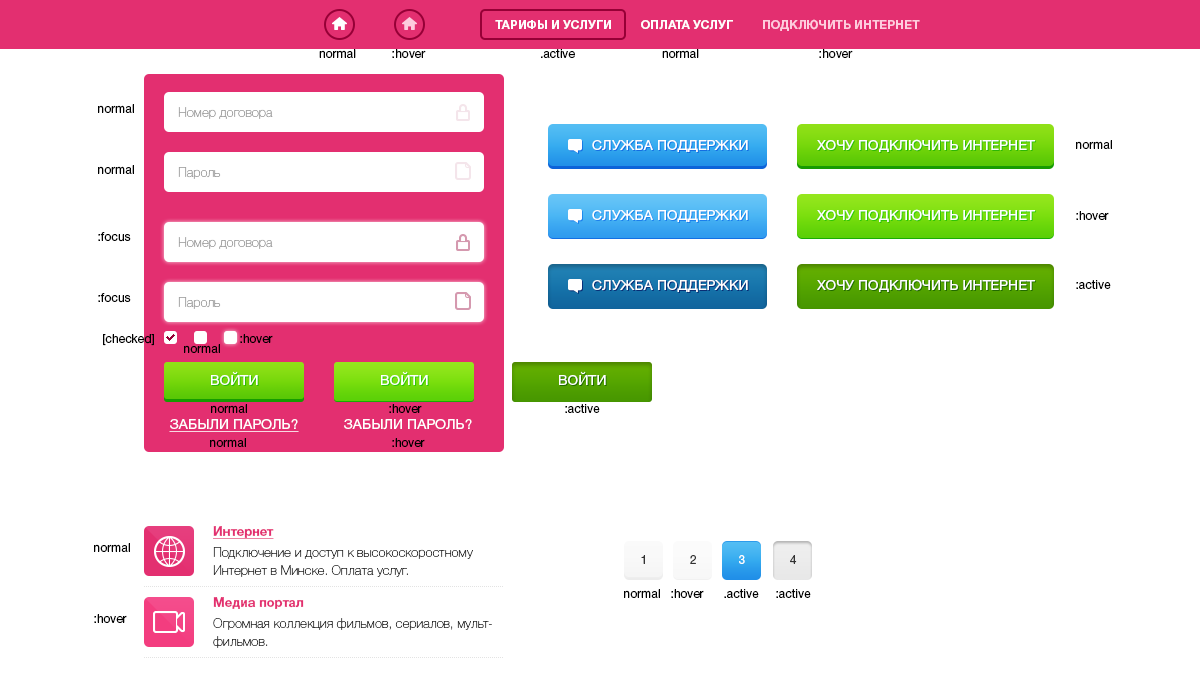
<style>
.page{position:relative;width:1200px;height:688px;background:#ffffff}
.page>*{position:absolute;margin:0}
.t1{font:12px "HelveticaNeueCyr-Bold";color:#ffffff;text-transform:uppercase}
.t2{font:12px "HelveticaNeueCyr-Bold";color:#fdcbdd;text-transform:uppercase}
.t3{font:12px "HelveticaNeueCyr-Roman";color:#000000}
.t4{font:13px "HelveticaNeueCyr-Thin";color:#a3a3a3}
.t5{font:14px "HelveticaNeueCyr-Roman";color:#ffffff;text-transform:uppercase}
.t6{font:14px "HelveticaNeueCyr-Roman";color:#ffffff;text-transform:uppercase;text-decoration:underline}
.t7{font:13px/18px "HelveticaNeueCyr-Thin";color:#333333}
.t8{font:13px "HelveticaNeueCyr-Bold";color:#e32f70;text-decoration:underline}
.t9{font:12px "HelveticaNeueCyr-Roman";color:#333333;text-transform:uppercase}
.t10{font:12px "HelveticaNeueCyr-Roman";color:#fffefe;text-transform:uppercase}
.t11{font:13px "HelveticaNeueCyr-Bold";color:#e32f70}
</style>
<div class="page">
<p class="t1" style="left:495px;top:20px;width:116px;height:10px">Тарифы и услуги</p>
<p class="t1" style="left:641px;top:20px;width:92px;height:10px">Оплата услуг</p>
<p class="t2" style="left:763px;top:19px;width:157px;height:12px">Подключить интернет</p>
<p class="t3" style="left:319px;top:49px;width:37px;height:9px">normal</p>
<p class="t3" style="left:392px;top:49px;width:34px;height:9px">:hover</p>
<p class="t3" style="left:541px;top:49px;width:34px;height:9px">.active</p>
<p class="t3" style="left:662px;top:49px;width:37px;height:9px">normal</p>
<p class="t3" style="left:819px;top:49px;width:34px;height:9px">:hover</p>
<p class="t3" style="left:98px;top:104px;width:36px;height:9px">normal</p>
<p class="t4" style="left:178px;top:107px;width:95px;height:12px">Номер договора</p>
<p class="t5" style="left:592px;top:140px;width:156px;height:12px">Служба поддержки</p>
<p class="t5" style="left:817px;top:139px;width:218px;height:13px">Хочу подключить интернет</p>
<p class="t3" style="left:1076px;top:140px;width:36px;height:9px">normal</p>
<p class="t3" style="left:98px;top:165px;width:36px;height:9px">normal</p>
<p class="t4" style="left:178px;top:167px;width:43px;height:12px">Пароль</p>
<p class="t5" style="left:817px;top:209px;width:218px;height:13px">Хочу подключить интернет</p>
<p class="t5" style="left:592px;top:210px;width:156px;height:12px">Служба поддержки</p>
<p class="t3" style="left:1076px;top:211px;width:33px;height:9px">:hover</p>
<p class="t3" style="left:98px;top:232px;width:33px;height:10px">:focus</p>
<p class="t4" style="left:178px;top:237px;width:95px;height:12px">Номер договора</p>
<p class="t5" style="left:592px;top:280px;width:156px;height:12px">Служба поддержки</p>
<p class="t5" style="left:817px;top:279px;width:218px;height:13px">Хочу подключить интернет</p>
<p class="t3" style="left:1076px;top:280px;width:35px;height:9px">:active</p>
<p class="t3" style="left:98px;top:293px;width:33px;height:10px">:focus</p>
<p class="t4" style="left:178px;top:297px;width:43px;height:12px">Пароль</p>
<p class="t3" style="left:103px;top:334px;width:51px;height:12px">[checked]</p>
<p class="t3" style="left:240px;top:334px;width:33px;height:9px">:hover</p>
<p class="t3" style="left:184px;top:344px;width:36px;height:9px">normal</p>
<p class="t5" style="left:211px;top:371px;width:47px;height:14px">Войти</p>
<p class="t5" style="left:381px;top:371px;width:47px;height:14px">Войти</p>
<p class="t5" style="left:559px;top:371px;width:47px;height:14px">Войти</p>
<p class="t3" style="left:211px;top:404px;width:36px;height:9px">normal</p>
<p class="t3" style="left:389px;top:404px;width:33px;height:9px">:hover</p>
<p class="t3" style="left:565px;top:404px;width:35px;height:9px">:active</p>
<p class="t6" style="left:169px;top:419px;width:130px;height:13px">Забыли пароль?</p>
<p class="t5" style="left:344px;top:419px;width:128px;height:11px">Забыли пароль?</p>
<p class="t3" style="left:210px;top:438px;width:36px;height:9px">normal</p>
<p class="t3" style="left:392px;top:438px;width:33px;height:9px">:hover</p>
<p class="t7" style="left:213px;top:526px;width:260px;height:51px"><span class="t8">Интернет<br></span>Подключение и доступ к высокоскоростному<br>Интернет в Минске. Оплата услуг.</p>
<p class="t3" style="left:94px;top:543px;width:36px;height:9px">normal</p>
<p class="t9" style="left:641px;top:555px;width:4px;height:9px">1</p>
<p class="t9" style="left:690px;top:555px;width:6px;height:9px">2</p>
<p class="t10" style="left:739px;top:555px;width:6px;height:9px">3</p>
<p class="t9" style="left:790px;top:555px;width:7px;height:9px">4</p>
<p class="t3" style="left:624px;top:589px;width:36px;height:9px">normal</p>
<p class="t3" style="left:671px;top:589px;width:33px;height:9px">:hover</p>
<p class="t3" style="left:724px;top:589px;width:35px;height:9px">.active</p>
<p class="t3" style="left:776px;top:589px;width:35px;height:9px">:active</p>
<p class="t7" style="left:213px;top:597px;width:279px;height:51px"><span class="t11">Медиа портал<br></span>Огромная коллекция фильмов, сериалов, мульт-<br>фильмов.</p>
<p class="t3" style="left:94px;top:614px;width:33px;height:9px">:hover</p>
</div>
